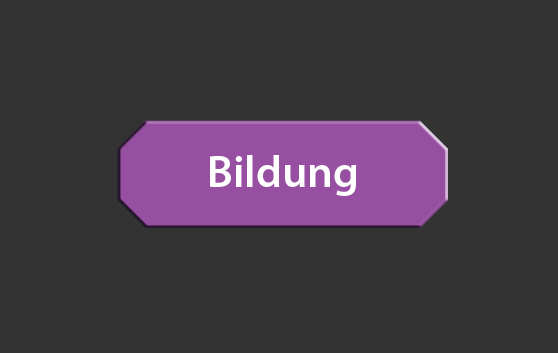
<style>
.page{position:relative;width:558px;height:353px;background:#333333}
.page>*{position:absolute;margin:0}
.t1{font:45px "MyriadPro-Semibold";color:#ffffff}
</style>
<div class="page">
<p class="t1" style="left:210px;top:155px;width:147px;height:41px">Bildung</p>
</div>
